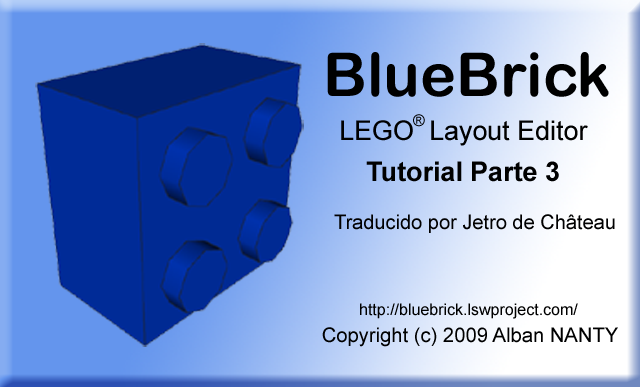
<style>
.page{position:relative;width:640px;height:387px}
.page>*{position:absolute;margin:0}
.t1{font:60.6px "ArialRoundedMTBold";color:#000000}
.t2{font:26.9px "ArialMT";color:#000000}
.t3{font:16px "ArialMT";color:#000000}
.t4{font:26.9px "Arial-BoldMT";color:#000000}
.t5{font:20px "ArialMT";color:#000000}
.t6{font:20.2px "ArialMT";color:#000000}
</style>
<div class="page">
<p class="t1" style="left:327px;top:52px;width:282px;height:45px">BlueBrick</p>
<p class="t2" style="left:341px;top:120px;width:247px;height:26px">LEGO  Layout Editor</p>
<p class="t3" style="left:413px;top:114px;width:12px;height:13px">®</p>
<p class="t4" style="left:366px;top:161px;width:193px;height:21px">Tutorial Parte 3</p>
<p class="t5" style="left:334px;top:214px;width:281px;height:19px">Traducido por Jetro de Château</p>
<p class="t3" style="left:360px;top:303px;width:218px;height:16px">http://bluebrick.lswproject.com/</p>
<p class="t6" style="left:322px;top:327px;width:296px;height:20px">Copyright (c) 2009 Alban NANTY</p>
</div>
